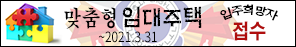
<style>
.page{position:relative;width:296px;height:47px;background:#ffffff}
.page>*{position:absolute;margin:0}
.t1{font:24px "H2mkpB";color:#000000;scale:0.85 1}
.t2{font:11px "NotoSansCJKkr-Light";color:#000000;scale:0.85 1}
.t3{font:22px "H2mjrE";color:#000000;scale:0.85 1}
.t4{font:20px "H2gtrE";color:#b00e0e;scale:0.85 1}
.t5{font:14px "NotoSansCJKkr-Regular";color:#000000;scale:0.85 1}
</style>
<div class="page">
<p class="t1" style="left:122px;top:6px;width:80px;height:22px">임대주택</p>
<p class="t2" style="left:220px;top:4px;width:58px;height:17px">입주희망자</p>
<p class="t3" style="left:64px;top:7px;width:52px;height:22px">맞춤형</p>
<p class="t4" style="left:232px;top:21px;width:34px;height:20px">접수</p>
<p class="t5" style="left:98px;top:31px;width:59px;height:12px">~2021.3.31</p>
</div>
